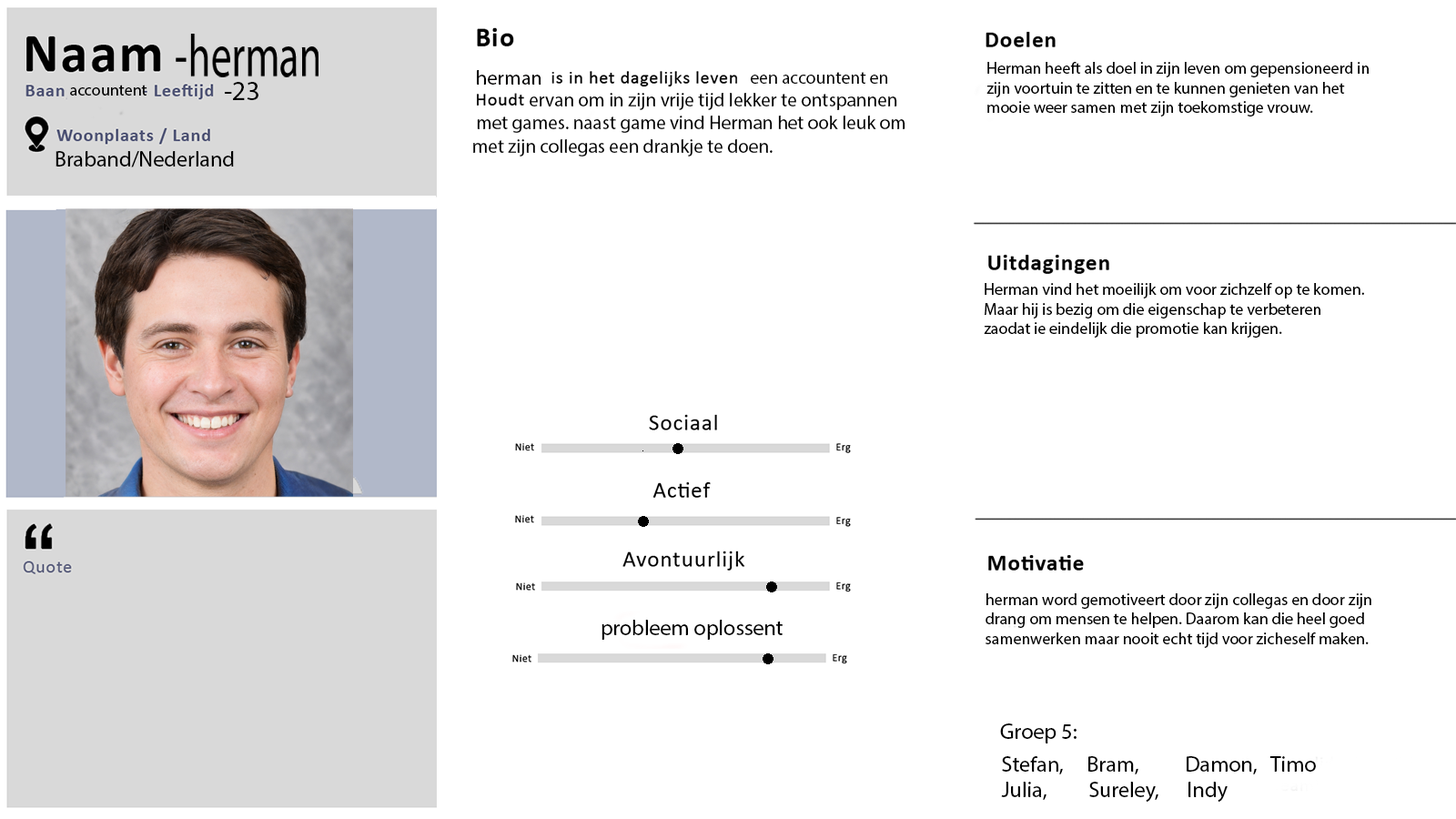
<style>
.page{position:relative;width:1456px;height:819px;background:#ffffff}
.page>*{position:absolute;margin:0}
.t1{font:16.4px "MyriadPro-Regular";color:#000000}
.t2{font:20.5px "MyriadPro-Regular";color:#010000}
.t3{font:17.8px "MyriadPro-Regular";color:#000000}
.t4{font:16.4px "MyriadPro-Regular";color:#010101}
.t5{font:27.3px "MyriadPro-Regular";color:#000000}
.t6{font:19.2px "MyriadPro-Regular";color:#000000}
.t7{font:21.8px "MyriadPro-Regular";color:#000000}
</style>
<div class="page">
<p class="t1" style="left:986px;top:62px;width:383px;height:54px">Herman heeft als doel in zijn leven om gepensioneerd in<br>zijn voortuin te zitten en te kunnen genieten van het <br>mooie weer samen met zijn toekomstige vrouw.</p>
<p class="t2" style="left:477px;top:70px;width:64px;height:15px">herman</p>
<p class="t3" style="left:751px;top:72px;width:136px;height:12px">een accountent en</p>
<p class="t4" style="left:70px;top:85px;width:77px;height:11px">accountent</p>
<p class="t5" style="left:225px;top:82px;width:33px;height:18px">-23</p>
<p class="t6" style="left:473px;top:93px;width:432px;height:64px">ervan om in zijn vrije tijd lekker te ontspannen<br> met games. naast game vind Herman het ook leuk om <br>met zijn collegas een drankje te doen.</p>
<p class="t7" style="left:56px;top:151px;width:178px;height:16px">Braband/Nederland</p>
<p class="t1" style="left:984px;top:283px;width:380px;height:55px">Herman vind het moeilijk om voor zichzelf op te komen.<br>Maar hij is bezig om die eigenschap te verbeteren<br>zaodat ie eindelijk die promotie kan krijgen.</p>
<p class="t1" style="left:986px;top:593px;width:385px;height:55px">herman word gemotiveert door zijn collegas en door zijn<br>drang om mensen te helpen. Daarom kan die heel goed <br>samenwerken maar nooit echt tijd voor zicheself maken.</p>
<p class="t7" style="left:602px;top:620px;width:181px;height:20px">probleem oplossent</p>
<p class="t7" style="left:1000px;top:723px;width:77px;height:20px">Groep 5:</p>
<p class="t7" style="left:1001px;top:756px;width:315px;height:46px">Stefan,     Bram,          Damon,   Timo<br>Julia,         Sureley,      Indy</p>
</div>
